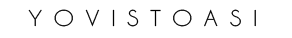
<style>
.page{position:relative;width:292px;height:38px;background:#ffffff}
.page>*{position:absolute;margin:0}
.t1{font:20.5px "CaviarDreams";letter-spacing:0.5em;color:#000000;scale:1.11 1}
</style>
<div class="page">
<p class="t1" style="left:28px;top:9px;width:228px;height:18px">YOVISTOASI</p>
</div>
